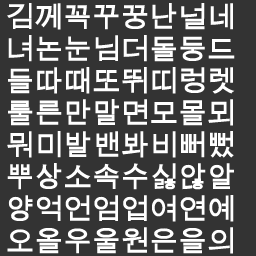
<style>
.page{position:relative;width:256px;height:256px;background:#333333}
.page>*{position:absolute;margin:0}
.t1{font:28px "ArialUnicodeMS";color:#ffffff;font-weight:bold}
</style>
<div class="page">
<p class="t1" style="left:7px;top:3px;width:228px;height:251px">김께꼭꾸꿍난널네<br>녀논눈님더돌둥드<br>들따때또뛰띠렁렛<br>룰른만말면모몰뫼<br>뭐미발밴봐비뻐뻤<br>뿌상소속수싫않알<br>양억언엄업여연예<br>오올우울원은을의</p>
</div>
